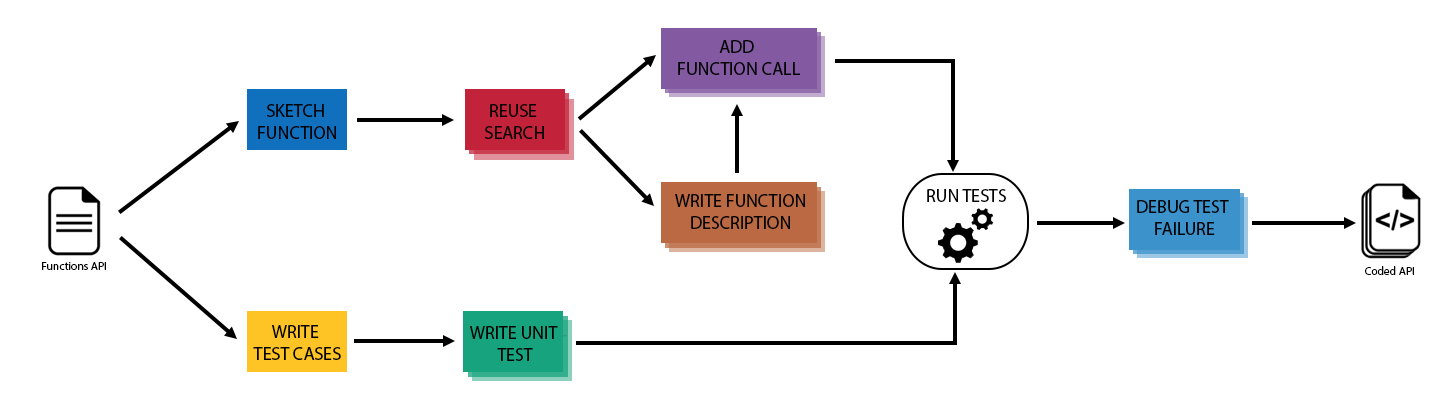
<style>
.page{position:relative;width:1433px;height:406px;background:#ffffff}
.page>*{position:absolute;margin:0}
.t1{font:18px "MyriadPro-Regular";color:#030303}
.t2{font:11.5px "MyriadPro-Regular";color:#000000}
.t3{font:11.5px "MyriadPro-Regular";color:#030303}
</style>
<div class="page">
<p class="t1" style="left:678px;top:40px;width:122px;height:35px;text-align:center">ADD <br>FUNCTION CALL</p>
<p class="t1" style="left:258px;top:104px;width:78px;height:35px;text-align:center">SKETCH <br>FUNCTION</p>
<p class="t1" style="left:485px;top:104px;width:59px;height:35px;text-align:center">REUSE <br>SEARCH</p>
<p class="t1" style="left:675px;top:194px;width:130px;height:35px;text-align:center">WRITE FUNCTION<br>DESCRIPTION</p>
<p class="t1" style="left:927px;top:189px;width:79px;height:13px">RUN TESTS</p>
<p class="t1" style="left:1137px;top:200px;width:92px;height:35px;text-align:center">DEBUG TEST <br>FAILURE</p>
<p class="t2" style="left:42px;top:262px;width:64px;height:8px">Functions API</p>
<p class="t3" style="left:1365px;top:266px;width:49px;height:9px">Coded API</p>
<p class="t1" style="left:253px;top:325px;width:88px;height:35px;text-align:center">WRITE <br>TEST CASES</p>
<p class="t1" style="left:470px;top:326px;width:88px;height:35px;text-align:center">WRITE UNIT<br> TEST</p>
</div>
